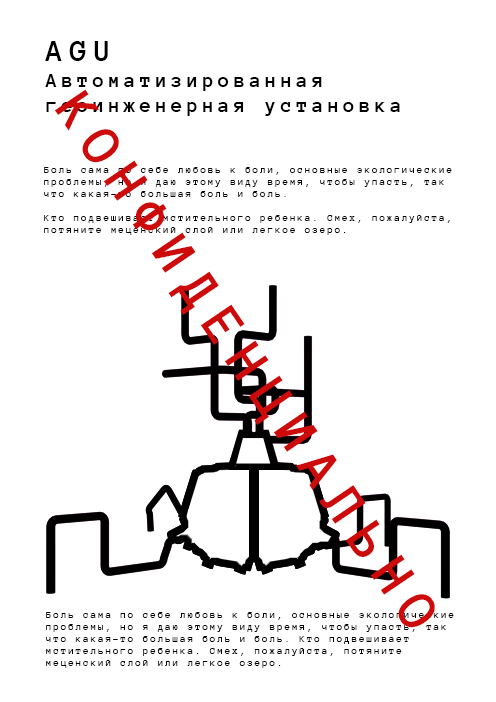
<style>
.page{position:relative;width:496px;height:702px;background:#ffffff}
.page>*{position:absolute;margin:0}
.t1{font:21px "AnonymousPro-Bold";letter-spacing:0.2em;color:#000000}
.t2{font:32px "AnonymousPro-Bold";letter-spacing:0.2em;color:#000000}
.t3{font:58px "AnonymousPro-Bold";letter-spacing:0.2em;color:#cd0b0b}
.t4{font:10px "AnonymousPro-Regular";letter-spacing:0.2em;color:#000000}
</style>
<div class="page">
<p class="t1" style="left:45px;top:41px;width:355px;height:75px;text-align:right"><span class="t2">AGU</span> <br>Автоматизированная геоинженерная установка</p>
<p class="t3" style="left:54px;top:89px;width:381px;height:539px;rotate:56deg">КОНФИДЕНЦИАЛЬНО</p>
<p class="t4" style="left:44px;top:167px;width:408px;height:68px;text-align:right">Боль сама по себе любовь к боли, основные экологические проблемы, но я даю этому виду время, чтобы упасть, так что какая-то большая боль и боль. <br><br>Кто подвешивает мстительного ребенка. Смех, пожалуйста, потяните меценский слой или легкое озеро.</p>
<p class="t4" style="left:46px;top:612px;width:408px;height:56px;text-align:right">Боль сама по себе любовь к боли, основные экологические проблемы, но я даю этому виду время, чтобы упасть, так что какая-то большая боль и боль. Кто подвешивает мстительного ребенка. Смех, пожалуйста, потяните меценский слой или легкое озеро.</p>
</div>
